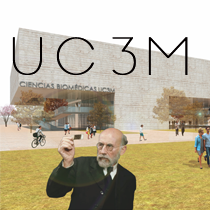
<style>
.page{position:relative;width:210px;height:210px;background:#fefefe}
.page>*{position:absolute;margin:0}
.t1{font:48.4px "SusannaRegular";letter-spacing:0.18em;color:#040000;font-weight:bold}
</style>
<div class="page">
<p class="t1" style="left:12px;top:37px;width:176px;height:38px">UC3M</p>
</div>
